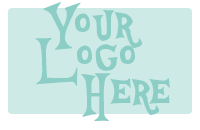
<style>
.page{position:relative;width:200px;height:130px;background:#cdeae6}
.page>*{position:absolute;margin:0}
.t1{font:72px "GenerationB";color:#8ccec6}
</style>
<div class="page">
<p class="t1" style="left:43px;top:2px;width:99px;height:48px">Your</p>
<p class="t1" style="left:35px;top:38px;width:100px;height:48px">Logo</p>
<p class="t1" style="left:81px;top:73px;width:89px;height:48px">Here</p>
</div>
